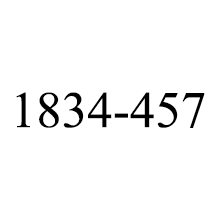
<style>
.page{position:relative;width:221px;height:221px;background:#ffffff}
.page>*{position:absolute;margin:0}
.t1{font:51.1px "TimesNewRomanPSMT";color:#000000}
</style>
<div class="page">
<p class="t1" style="left:16px;top:92px;width:189px;height:36px">1834-457</p>
</div>
